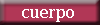
<style>
.page{position:relative;width:100px;height:25px;background:#b13756}
.page>*{position:absolute;margin:0}
.t1{font:18px "CambriaMath";color:#fffefe}
</style>
<div class="page">
<p class="t1" style="left:22px;top:9px;width:52px;height:13px">cuerpo</p>
</div>
